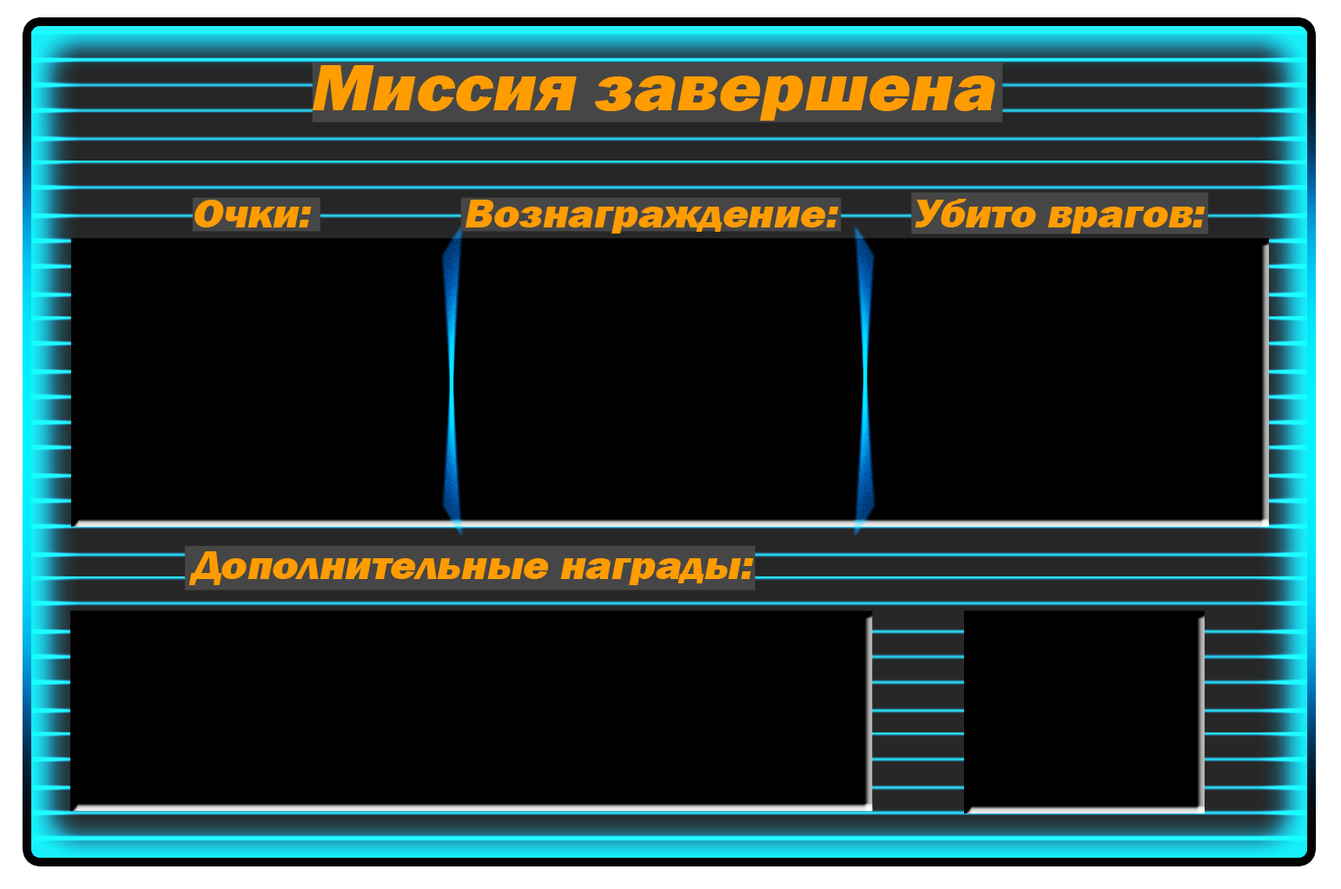
<style>
.page{position:relative;width:1341px;height:889px;background:#000000}
.page>*{position:absolute;margin:0}
.t1{font:40.6px/13px "FranklinGothic-Heavy";color:#ff9c00;font-style:italic;scale:1.08 1}
.t2{font:54.2px/13px "FranklinGothic-Heavy";color:#ff9c00;font-style:italic;scale:1.08 1}
.t3{font:67.7px/13px "FranklinGothic-Heavy";color:#ff9c00;font-style:italic;scale:1.08 1}
</style>
<div class="page">
<p class="t1" style="left:188px;top:65px;width:1017px;height:520px"><span class="t2">        </span><span class="t3">Миссия завершена<br>  <br><br><br><br><br><br><br><br></span>Очки:              Вознаграждение:       Убито врагов:<br><br><br><br><br><br><br><br><br><br><br><br><br><br><br><br><br><br><br><br><br><br><br><br><br><br><br>Дополнительные награды:</p>
</div>
